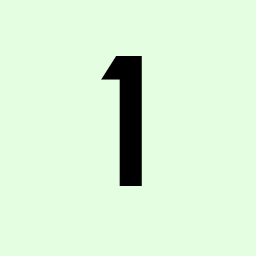
<style>
.page{position:relative;width:256px;height:256px;background:#e4fee2}
.page>*{position:absolute;margin:0}
.t1{font:153.3px "BMDoHyeon";color:#000000}
</style>
<div class="page">
<p class="t1" style="left:101px;top:56px;width:41px;height:130px">1</p>
</div>
